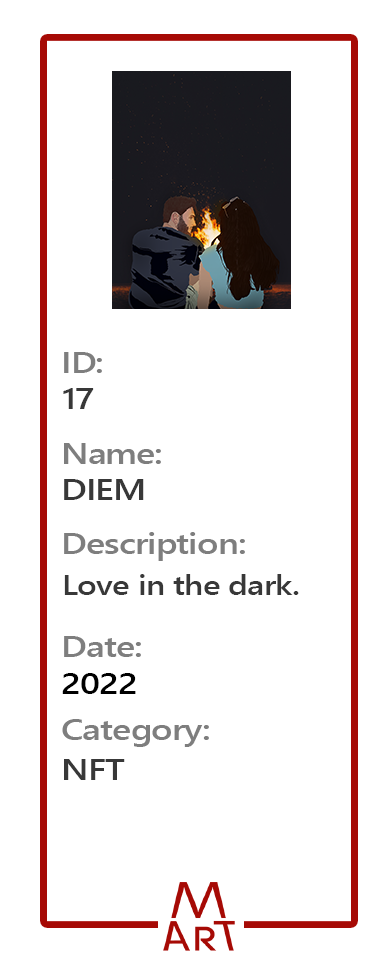
<style>
.page{position:relative;width:391px;height:964px;background:#ffffff}
.page>*{position:absolute;margin:0}
.t1{font:30.2px "SegoeUI-Semibold";letter-spacing:-0.02em;color:#7e7e7e;scale:1.18 1}
.t2{font:30.2px "SegoeUI-Semibold";letter-spacing:-0.02em;color:#383838;scale:1.18 1}
.t3{font:28.1px "SegoeUI-Semibold";letter-spacing:-0.02em;color:#383838;scale:1.18 1}
.t4{font:30.2px "SegoeUI-Semibold";letter-spacing:-0.02em;color:#000000;scale:1.18 1}
</style>
<div class="page">
<p class="t1" style="left:64px;top:352px;width:38px;height:21px">ID:</p>
<p class="t2" style="left:63px;top:388px;width:31px;height:21px">17</p>
<p class="t1" style="left:64px;top:443px;width:97px;height:21px">Name:</p>
<p class="t2" style="left:64px;top:479px;width:80px;height:21px">DIEM</p>
<p class="t1" style="left:64px;top:532px;width:181px;height:29px">Description:</p>
<p class="t3" style="left:64px;top:574px;width:235px;height:21px">Love in the dark.</p>
<p class="t1" style="left:64px;top:636px;width:77px;height:21px">Date:</p>
<p class="t4" style="left:62px;top:673px;width:74px;height:21px">2022</p>
<p class="t1" style="left:62px;top:719px;width:147px;height:28px">Category:</p>
<p class="t2" style="left:64px;top:759px;width:61px;height:21px">NFT</p>
</div>
